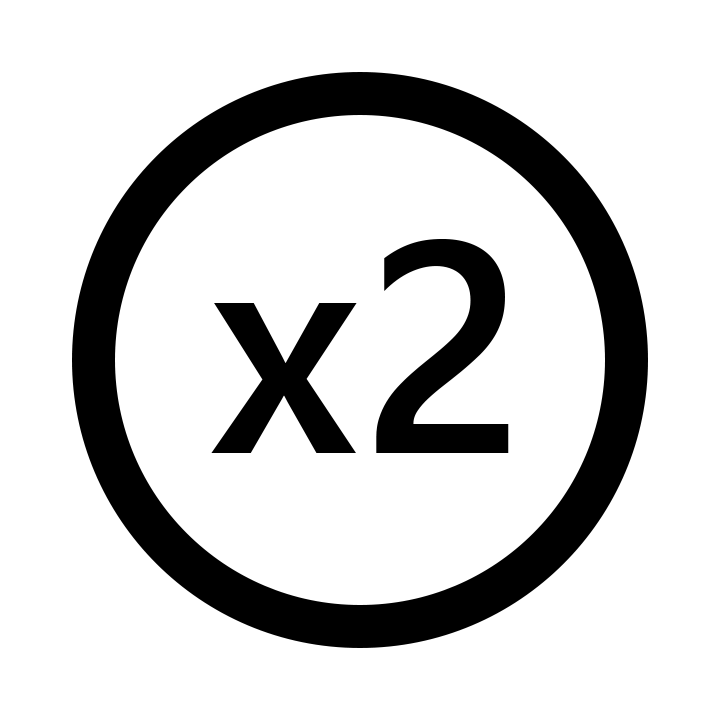
<style>
.page{position:relative;width:720px;height:720px;background:#ffffff}
.page>*{position:absolute;margin:0}
.t1{font:300px "SegoeUI-Semibold";letter-spacing:0.01em;color:#000000}
</style>
<div class="page">
<p class="t1" style="left:211px;top:239px;width:298px;height:214px">x2</p>
</div>
